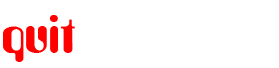
<style>
.page{position:relative;width:279px;height:68px;background:#ffffff}
.page>*{position:absolute;margin:0}
.t1{font:48px "Asimov";color:#ff0000}
</style>
<div class="page">
<p class="t1" style="left:3px;top:15px;width:72px;height:47px">quit</p>
</div>
